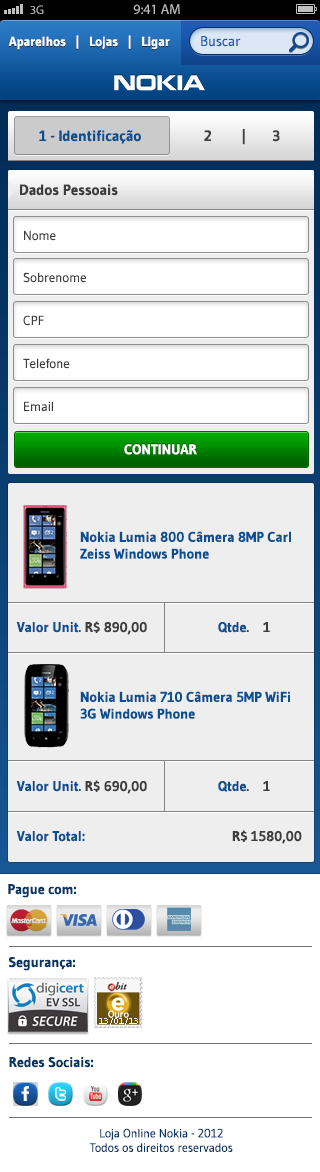
<style>
.page{position:relative;width:320px;height:1172px;background:#ffffff}
.page>*{position:absolute;margin:0}
.t1{font:12.3px "MyriadPro-Regular";color:#bfbfbf}
.t2{font:14px "MyriadPro-Regular";color:#bfbfbf}
.t3{font:13px "Gudea-Bold";color:#ffffff}
.t4{font:14px "Gudea";color:#1e58b1}
.t5{font:15px "Gudea-Bold";color:#0b4f91}
.t6{font:15px "Gudea-Bold";color:#404040}
.t7{font:15px "Gudea-Bold";color:#3e3e3e}
.t8{font:13px "Gudea";color:#3e3e3e}
.t9{font:14px "Gudea-Bold";color:#ffffff;text-transform:uppercase}
.t10{font:14px "Gudea-Bold";color:#0c5093}
.t11{font:14px "Gudea-Bold";color:#3e3e3e}
.t12{font:14px "Gudea-Bold";color:#063665}
.t13{font:12px "Gudea";color:#063665}
</style>
<div class="page">
<p class="t1" style="left:30px;top:5px;width:14px;height:9px">3G</p>
<p class="t2" style="left:133px;top:4px;width:47px;height:10px">9:41 AM</p>
<p class="t3" style="left:8px;top:35px;width:162px;height:15px">Aparelhos   |   Lojas   |   Ligar</p>
<p class="t4" style="left:201px;top:36px;width:40px;height:11px">Buscar</p>
<p class="t5" style="left:39px;top:130px;width:102px;height:14px">1 - Identificação</p>
<p class="t6" style="left:204px;top:129px;width:76px;height:16px">2        |       3</p>
<p class="t7" style="left:20px;top:184px;width:98px;height:12px">Dados Pessoais</p>
<p class="t8" style="left:24px;top:230px;width:32px;height:11px">Nome</p>
<p class="t8" style="left:23px;top:272px;width:63px;height:11px">Sobrenome</p>
<p class="t8" style="left:23px;top:315px;width:21px;height:11px">CPF</p>
<p class="t8" style="left:23px;top:358px;width:47px;height:11px">Telefone</p>
<p class="t8" style="left:24px;top:401px;width:29px;height:11px">Email</p>
<p class="t9" style="left:124px;top:444px;width:73px;height:11px">Continuar</p>
<p class="t10" style="left:80px;top:531px;width:211px;height:28px">Nokia Lumia 800 Câmera 8MP Carl Zeiss Windows Phone</p>
<p class="t10" style="left:16px;top:621px;width:131px;height:14px">Valor Unit. <span class="t11">R$ 890,00</span></p>
<p class="t10" style="left:218px;top:622px;width:52px;height:11px">Qtde.    <span class="t11">1</span></p>
<p class="t10" style="left:80px;top:691px;width:210px;height:28px">Nokia Lumia 710 Câmera 5MP WiFi 3G Windows Phone</p>
<p class="t10" style="left:16px;top:780px;width:131px;height:14px">Valor Unit. <span class="t11">R$ 690,00</span></p>
<p class="t10" style="left:218px;top:781px;width:52px;height:11px">Qtde.    <span class="t11">1</span></p>
<p class="t10" style="left:16px;top:830px;width:286px;height:14px">Valor Total:                                          <span class="t11">R$ 1580,00</span></p>
<p class="t12" style="left:8px;top:884px;width:68px;height:14px">Pague com:</p>
<p class="t12" style="left:8px;top:957px;width:67px;height:14px">Segurança:</p>
<p class="t12" style="left:9px;top:1057px;width:84px;height:11px">Redes Sociais:</p>
<p class="t13" style="left:89px;top:1128px;width:144px;height:24px;text-align:center">Loja Online Nokia - 2012<br>Todos os direitos reservados</p>
</div>
